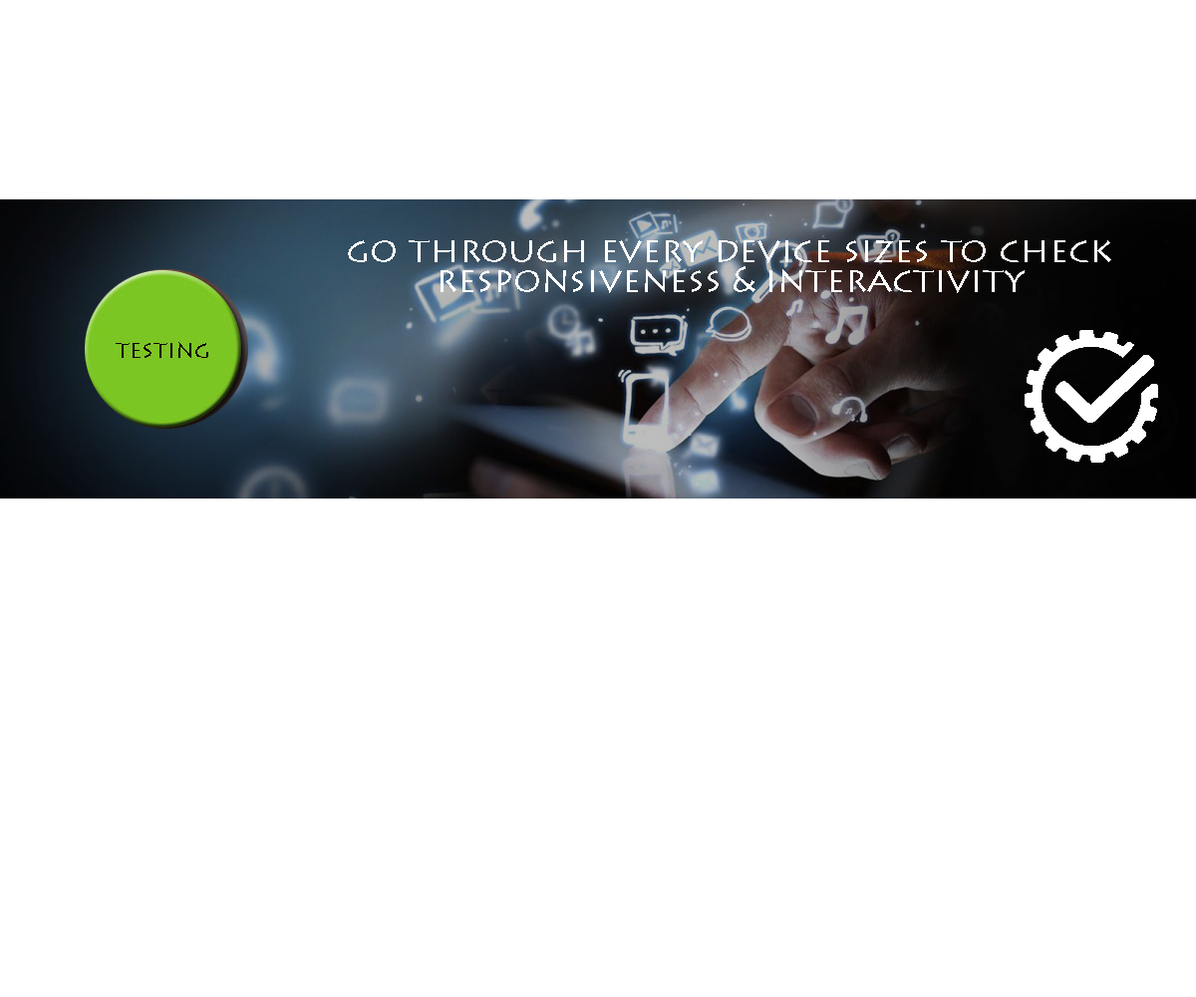
<style>
.page{position:relative;width:1196px;height:997px;background:#ffffff}
.page>*{position:absolute;margin:0}
.t1{font:35.9px/29.9px "LithosPro-Regular";color:#fffefe}
</style>
<div class="page">
<p class="t1" style="left:348px;top:240px;width:763px;height:53px;text-align:center">go through every device sizes to check<br>responsiveness &amp; interactivity</p>
</div>
